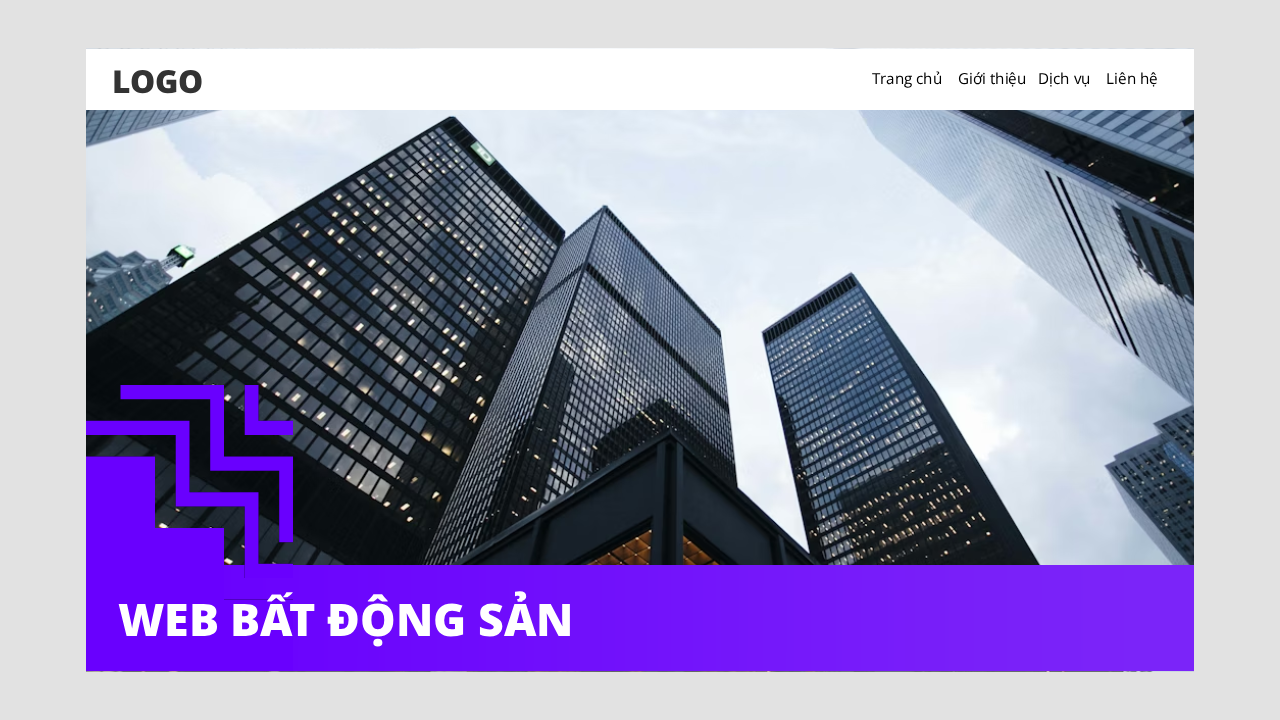
<style>
.page{position:relative;width:1280px;height:720px;background:#e2e2e2}
.page>*{position:absolute;margin:0}
.t1{font:31.6px "OpenSans-Extrabold";color:#333333}
.t2{font:15.2px "OpenSansRoman-Regular";color:#000000}
.t3{font:44.8px "OpenSans-Extrabold";color:#ffffff}
</style>
<div class="page">
<p class="t1" style="left:114px;top:70px;width:88px;height:24px">LOGO</p>
<p class="t2" style="left:872px;top:71px;width:285px;height:17px">Trang chủ    Giới thiệu   Dịch vụ    Liên hệ</p>
<p class="t3" style="left:118px;top:591px;width:452px;height:56px">WEB BẤT ĐỘNG SẢN</p>
</div>
